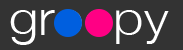
<style>
.page{position:relative;width:183px;height:50px;background:#333333}
.page>*{position:absolute;margin:0}
.t1{font:47.2px "HelveticaNeue-Light";color:#ffffff;scale:1.13 1}
</style>
<div class="page">
<p class="t1" style="left:10px;top:10px;width:159px;height:35px">groopy</p>
</div>
